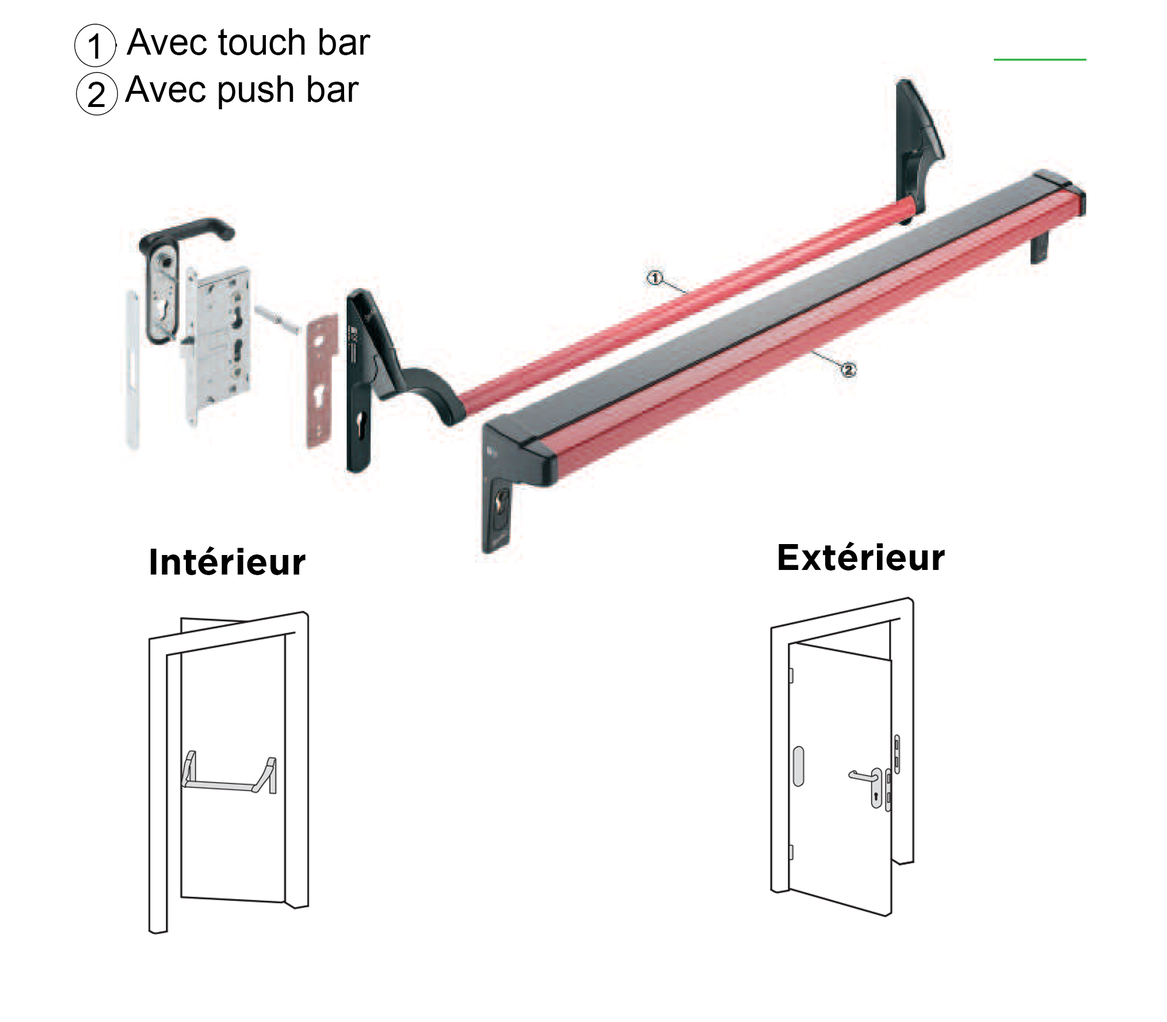
<style>
.page{position:relative;width:1167px;height:1022px;background:#ffffff}
.page>*{position:absolute;margin:0}
.t1{font:36.6px "ArialMT";color:#000000}
.t2{font:34.9px "ArialMT";color:#000000}
.t3{font:36.6px "Gotham-Bold";color:#000000}
</style>
<div class="page">
<p class="t1" style="left:90px;top:28px;width:280px;height:27px">1- Avec touch bar</p>
<p class="t2" style="left:89px;top:33px;width:9px;height:26px">1</p>
<p class="t1" style="left:86px;top:75px;width:273px;height:34px">2- Avec push bar</p>
<p class="t2" style="left:87px;top:82px;width:18px;height:25px">2</p>
<p class="t3" style="left:151px;top:546px;width:154px;height:29px">Intérieur</p>
<p class="t3" style="left:778px;top:541px;width:167px;height:30px">Extérieur</p>
</div>
